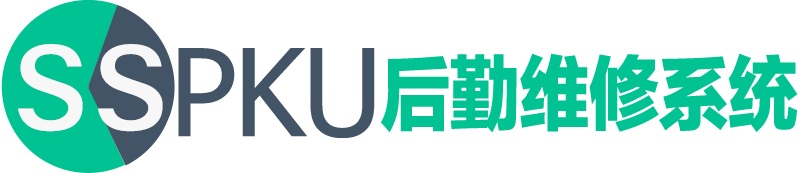
<style>
.page{position:relative;width:800px;height:173px;background:#ffffff}
.page>*{position:absolute;margin:0}
.t1{font:173px "SIL-Hei-Med-Jian";color:#f7f7f7}
.t2{font:121px "Tahoma";letter-spacing:-0.02em;color:#435466}
.t3{font:82.4px "FZLTTHK--GBK1-0";letter-spacing:-0.02em;color:#00c292;scale:0.86 1}
</style>
<div class="page">
<p class="t1" style="left:18px;top:44px;width:65px;height:88px">s</p>
<p class="t1" style="left:98px;top:44px;width:65px;height:88px">s</p>
<p class="t2" style="left:178px;top:48px;width:197px;height:90px">PKU</p>
<p class="t3" style="left:381px;top:53px;width:417px;height:80px">后勤维修系统</p>
</div>
